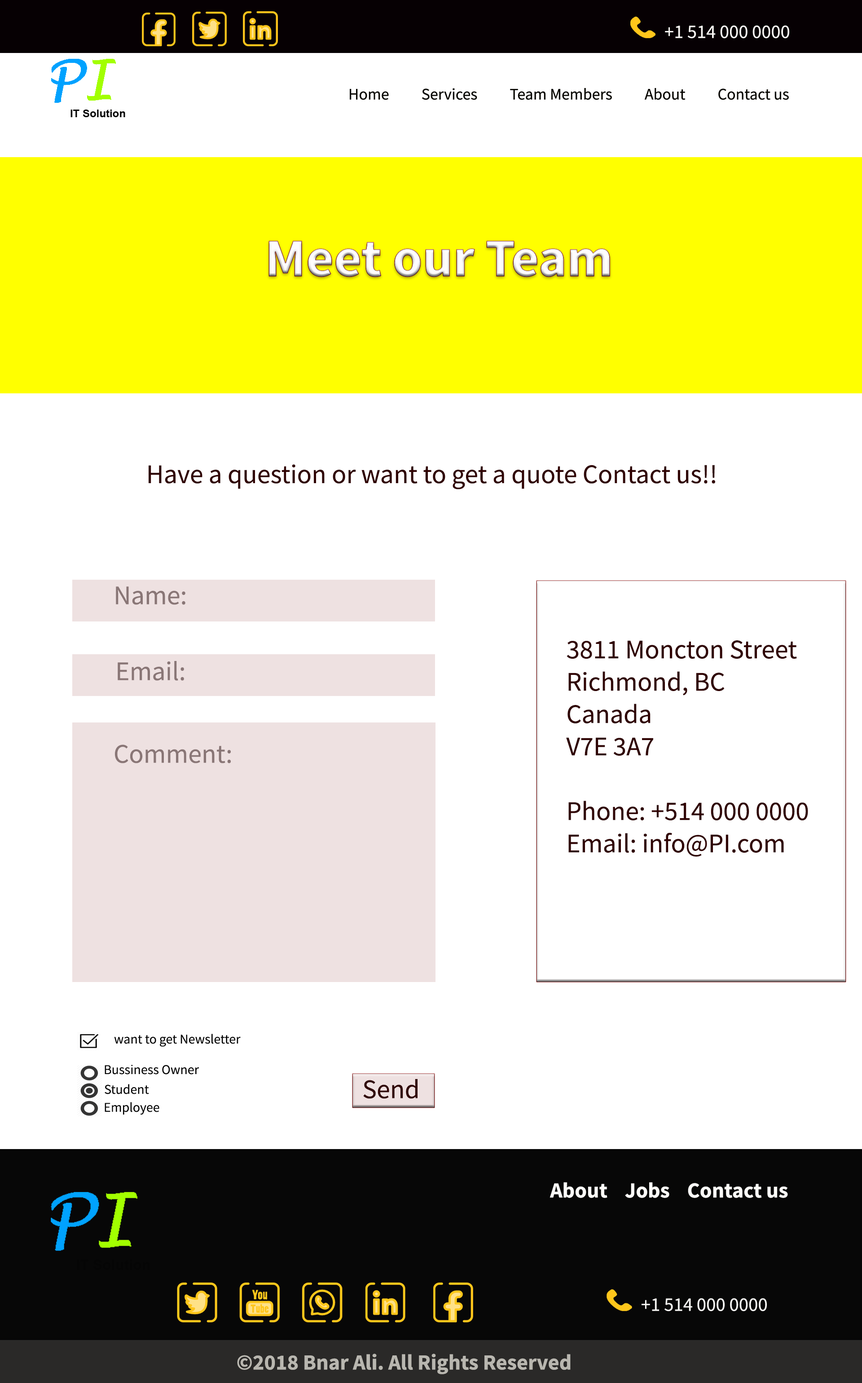
<style>
.page{position:relative;width:862px;height:1383px;background:#ffffff}
.page>*{position:absolute;margin:0}
.t1{font:53.9px "SourceSansRoman-Bold";color:#fefcfd}
.t2{font:26.9px "SourceSansRoman-Regular";color:#300202}
.t3{font:26.9px "SourceSansRoman-Regular";color:#897676}
.t4{font:13.5px "SourceSansRoman-Regular";color:#020202}
</style>
<div class="page">
<p class="t1" style="left:269px;top:241px;width:341px;height:36px">Meet our Team</p>
<p class="t2" style="left:149px;top:464px;width:566px;height:25px">Have a question or want to get a quote Contact us!!</p>
<p class="t3" style="left:116px;top:586px;width:69px;height:19px">Name:</p>
<p class="t2" style="left:566px;top:640px;width:242px;height:217px">3811 Moncton Street<br>Richmond, BC<br>Canada<br>V7E 3A7<br><br>Phone: +514 000 0000<br>Email: info@PI.com</p>
<p class="t3" style="left:118px;top:661px;width:66px;height:20px">Email:</p>
<p class="t3" style="left:115px;top:745px;width:116px;height:18px">Comment:</p>
<p class="t4" style="left:114px;top:1034px;width:127px;height:13px">want to get Newsletter</p>
<p class="t4" style="left:105px;top:1065px;width:94px;height:10px">Bussiness Owner</p>
<p class="t4" style="left:105px;top:1084px;width:44px;height:10px">Student</p>
<p class="t4" style="left:105px;top:1102px;width:54px;height:13px">Employee</p>
</div>
